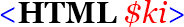
<style>
.page{position:relative;width:184px;height:27px;background:#ffffff}
.page>*{position:absolute;margin:0}
.t1{font:30px "Georgia-Bold";color:#000000}
.t2{font:30px "Georgia";color:#0000ff}
.t3{font:30px "Georgia-Italic";color:#ff0000}
</style>
<div class="page">
<p class="t1" style="left:0px;top:0px;width:184px;height:27px"><span class="t2">&lt;</span>HTML <span class="t3">$ki</span><span class="t2">&gt;</span></p>
</div>
